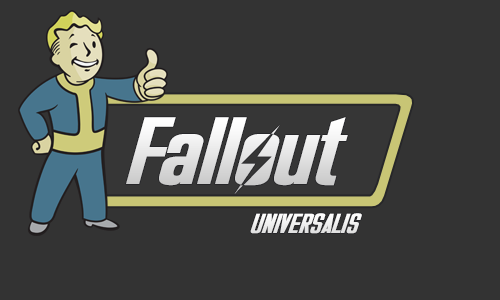
<style>
.page{position:relative;width:500px;height:300px;background:#333333}
.page>*{position:absolute;margin:0}
.t1{font:101.4px "Overseer";color:#e4e4e4;scale:0.96 1}
.t2{font:29.9px "Overseer";color:#ffffff;scale:0.95 1}
</style>
<div class="page">
<p class="t1" style="left:126px;top:117px;width:222px;height:77px">Fallout</p>
<p class="t2" style="left:250px;top:213px;width:112px;height:21px">UNIVERSALIS</p>
</div>
